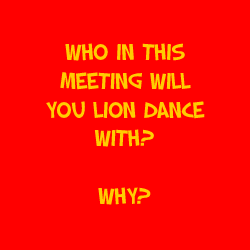
<style>
.page{position:relative;width:250px;height:250px;background:#ff0000}
.page>*{position:absolute;margin:0}
.t1{font:24px "SFSlapstickComic";color:#ffcd00}
</style>
<div class="page">
<p class="t1" style="left:46px;top:43px;width:159px;height:162px;text-align:center">Who in this<br>meeting will<br>you lion dance<br>with?<br><br>Why?</p>
</div>
